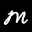
<style>
.page{position:relative;width:32px;height:32px;background:#000000}
.page>*{position:absolute;margin:0}
.t1{font:20.4px "Allura-Regular";color:#ffffff;font-weight:bold}
</style>
<div class="page">
<p class="t1" style="left:3px;top:10px;width:25px;height:15px">M</p>
</div>
